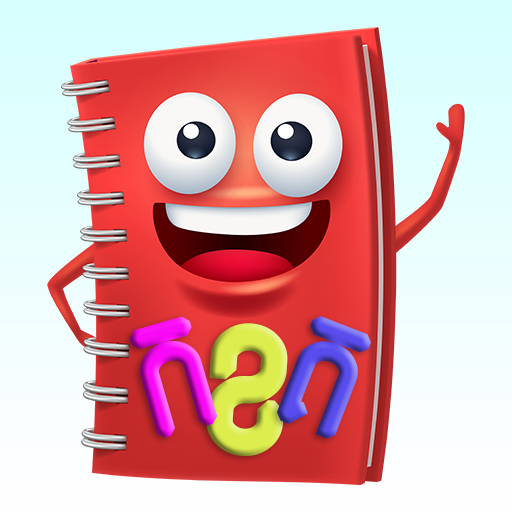
<style>
.page{position:relative;width:512px;height:512px}
.page>*{position:absolute;margin:0}
.t1{font:150px "AKbalthomKhmerLight";font-weight:bold;scale:0.87 1}
.t2{font:171.5px "AKbalthomKhmerLight";font-weight:bold;scale:0.87 1}
</style>
<div class="page">
<p class="t1" style="left:129px;top:316px;width:89px;height:122px;rotate:-16deg">ក</p>
<p class="t1" style="left:276px;top:316px;width:95px;height:123px;rotate:21deg">គ</p>
<p class="t2" style="left:206px;top:323px;width:82px;height:134px;rotate:4deg">ខ</p>
</div>
